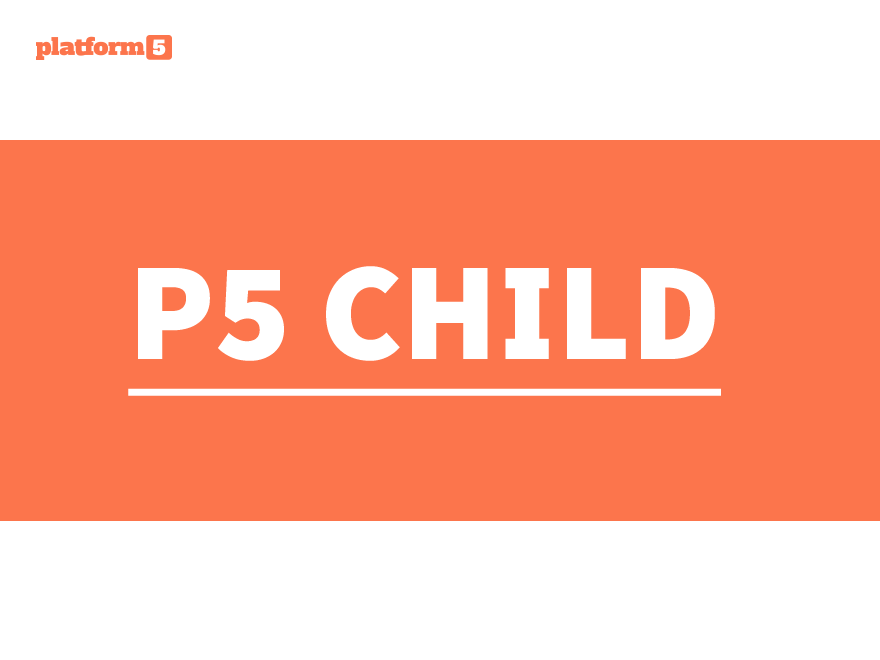
<style>
.page{position:relative;width:880px;height:660px;background:#fc754c}
.page>*{position:absolute;margin:0}
.t1{font:140.3px "SourceSansPro-Black";color:#ffffff;text-decoration:underline}
</style>
<div class="page">
<p class="t1" style="left:128px;top:266px;width:593px;height:130px">P5 CHILD</p>
</div>
